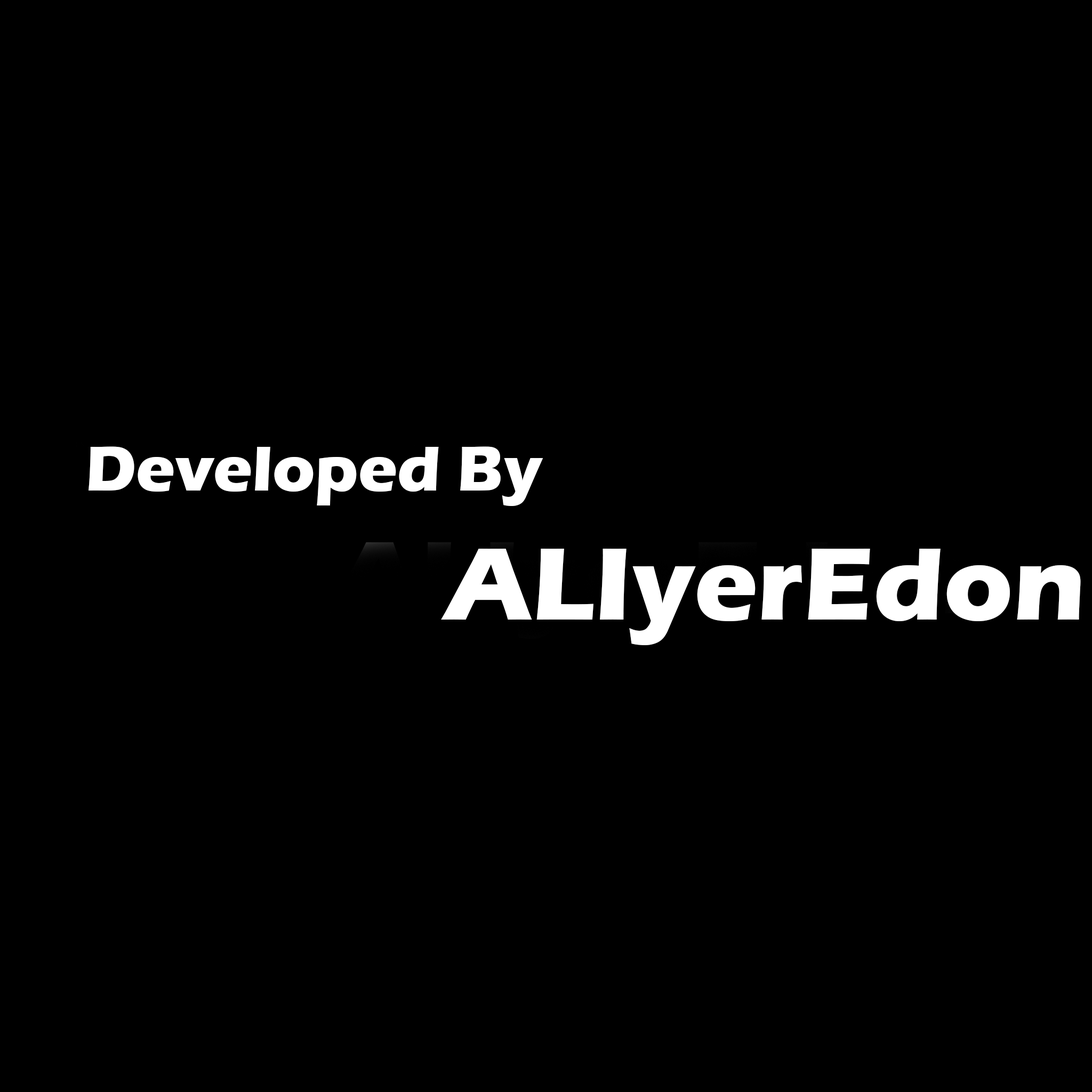
<style>
.page{position:relative;width:1092px;height:1092px;background:#000000}
.page>*{position:absolute;margin:0}
.t1{font:65.6px "ErasITC-Bold";color:#ffffff}
.t2{font:106.6px "ErasITC-Bold";color:#ffffff}
</style>
<div class="page">
<p class="t1" style="left:89px;top:446px;width:454px;height:60px">Developed By</p>
<p class="t2" style="left:441px;top:549px;width:640px;height:96px">ALIyerEdon</p>
</div>
